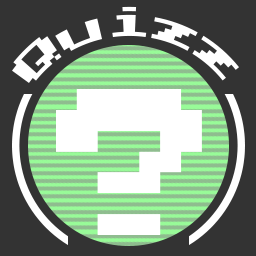
<style>
.page{position:relative;width:256px;height:256px;background:#333333}
.page>*{position:absolute;margin:0}
.t1{font:33.3px/75px "PressStart2P-Regular";letter-spacing:0.005em;color:#ffffff}
.t2{font:166.7px "PressStart2P-Regular";letter-spacing:0.005em;color:#ffffff}
</style>
<div class="page">
<p class="t1" style="left:12px;top:6px;width:227px;height:77px;text-align:center">Quizz</p>
<p class="t2" style="left:56px;top:89px;width:146px;height:146px">?</p>
</div>
